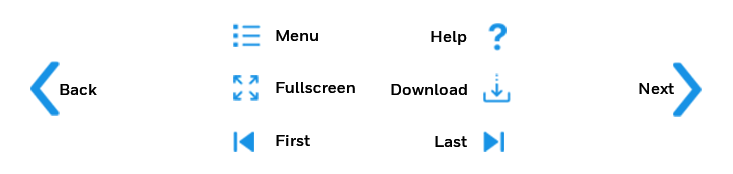
<style>
.page{position:relative;width:733px;height:174px;background:#ffffff}
.page>*{position:absolute;margin:0}
.t1{font:16px "HoneywellSansWeb-Bold";color:#000000}
</style>
<div class="page">
<p class="t1" style="left:276px;top:30px;width:42px;height:11px">Menu</p>
<p class="t1" style="left:431px;top:31px;width:36px;height:14px">Help</p>
<p class="t1" style="left:60px;top:84px;width:37px;height:11px">Back</p>
<p class="t1" style="left:276px;top:82px;width:79px;height:11px">Fullscreen</p>
<p class="t1" style="left:391px;top:84px;width:76px;height:11px">Download</p>
<p class="t1" style="left:639px;top:83px;width:35px;height:11px">Next</p>
<p class="t1" style="left:276px;top:135px;width:34px;height:11px">First</p>
<p class="t1" style="left:435px;top:136px;width:32px;height:11px">Last</p>
</div>
